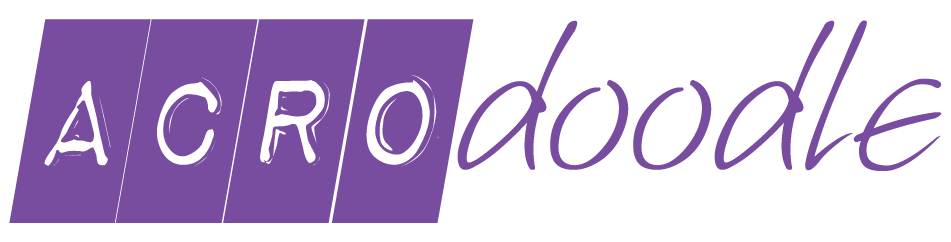
<style>
.page{position:relative;width:951px;height:242px;background:#ffffff}
.page>*{position:absolute;margin:0}
.t1{font:125px "Kingthings-Wrote";letter-spacing:0.05em;color:#784d9f;font-style:italic}
.t2{font:166.7px "ImpactLabel";letter-spacing:0.05em;color:#784d9f;font-style:italic}
</style>
<div class="page">
<p class="t1" style="left:9px;top:19px;width:933px;height:204px"><span class="t2">ACRO</span>doodle</p>
</div>
